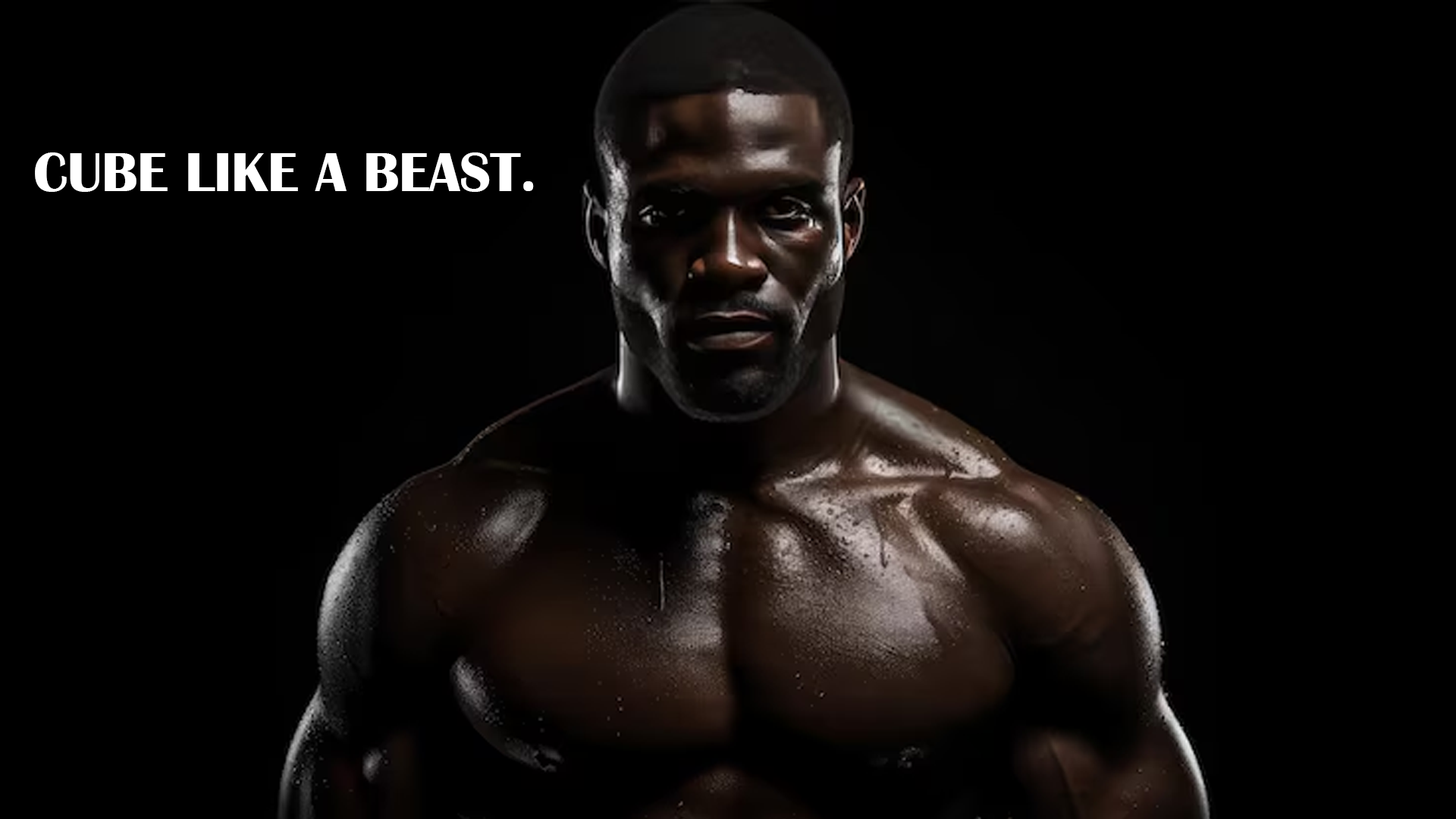
<style>
.page{position:relative;width:1456px;height:819px;background:#000000}
.page>*{position:absolute;margin:0}
.t1{font:56.9px "BritannicBold";color:#ffffff}
</style>
<div class="page">
<p class="t1" style="left:35px;top:152px;width:499px;height:40px">CUBE LIKE A BEAST.</p>
</div>
